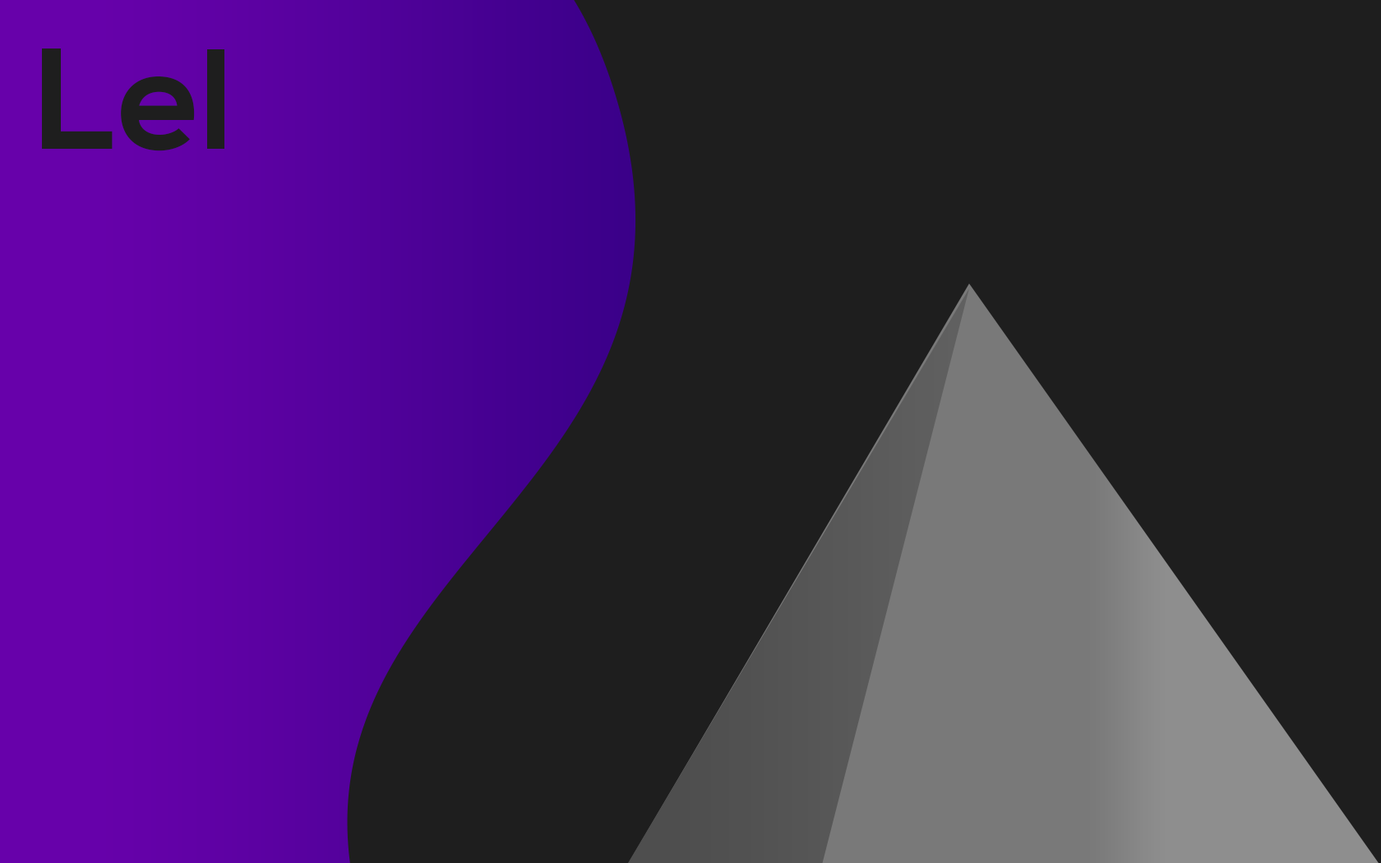
<style>
.page{position:relative;width:1381px;height:863px;background:#1e1e1e}
.page>*{position:absolute;margin:0}
.t1{font:142.6px "NexaBold";color:#1e1e1e}
</style>
<div class="page">
<p class="t1" style="left:42px;top:49px;width:182px;height:102px">Lel</p>
</div>
